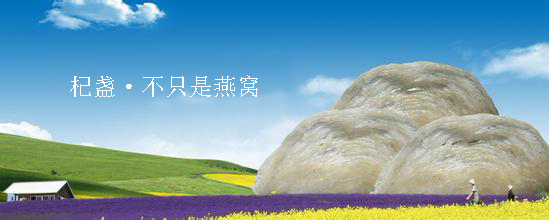
<style>
.page{position:relative;width:549px;height:220px}
.page>*{position:absolute;margin:0}
.t1{font:24px "SimSun";color:#fdfdfb}
</style>
<div class="page">
<p class="t1" style="left:70px;top:75px;width:188px;height:22px">杞盏·不只是燕窝</p>
</div>
